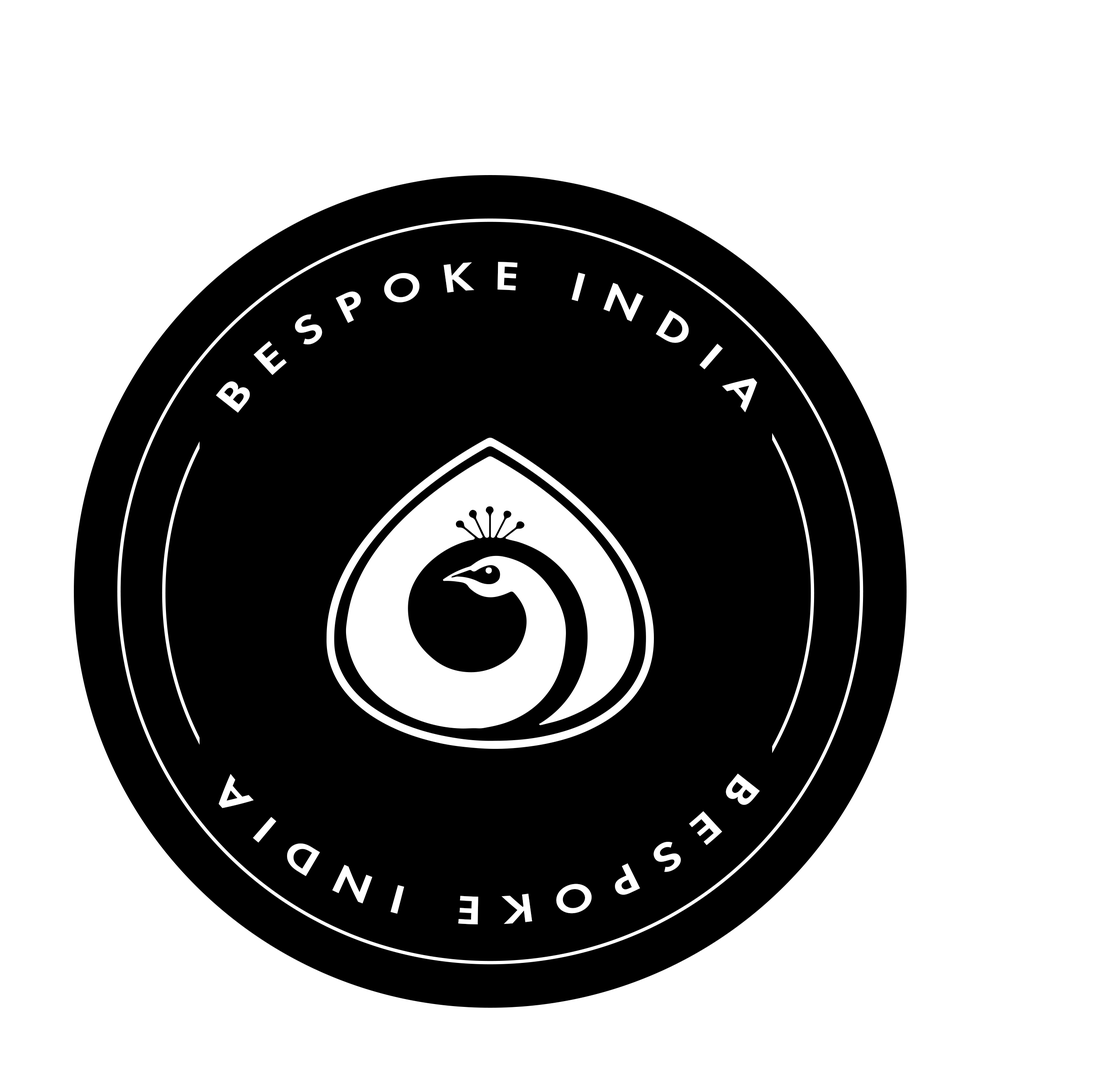
<style>
.page{position:relative;width:1102px;height:1082px;background:#ffffff}
.page>*{position:absolute;margin:0}
.t1{font:41.5px "Futura-Dem";letter-spacing:0.4em;color:#ffffff}
</style>
<div class="page">
<p class="t1" style="left:216px;top:262px;width:541px;height:151px;rotate:1deg">BESPOKE INDIA</p>
<p class="t1" style="left:219px;top:773px;width:541px;height:152px;rotate:-179deg">BESPOKE INDIA</p>
</div>
